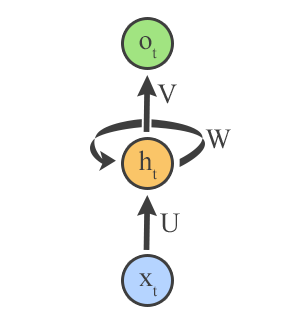
<style>
.page{position:relative;width:288px;height:324px;background:#ffffff}
.page>*{position:absolute;margin:0}
.t1{font:28.1px "TimesNewRomanPSMT";color:#3e3e3e}
</style>
<div class="page">
<p class="t1" style="left:139px;top:36px;width:18px;height:23px">ot</p>
<p class="t1" style="left:157px;top:84px;width:20px;height:20px">V</p>
<p class="t1" style="left:205px;top:129px;width:26px;height:20px">W</p>
<p class="t1" style="left:139px;top:150px;width:18px;height:30px">ht</p>
<p class="t1" style="left:160px;top:213px;width:20px;height:20px">U</p>
<p class="t1" style="left:139px;top:273px;width:19px;height:24px">xt</p>
</div>
